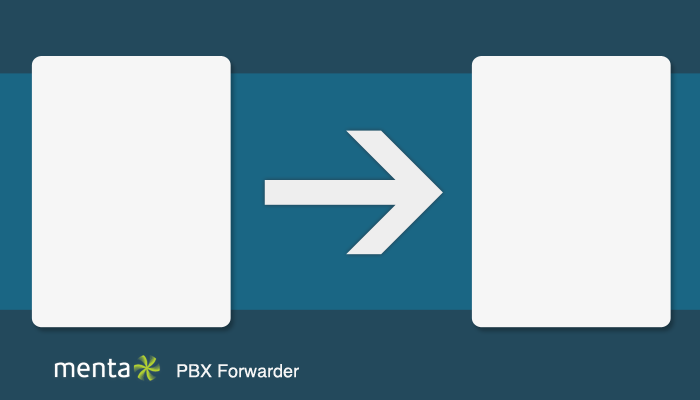
<style>
.page{position:relative;width:700px;height:400px;background:#f6f6f6}
.page>*{position:absolute;margin:0}
.t1{font:18px "Helvetica";color:#f6f6f6}
</style>
<div class="page">
<p class="t1" style="left:177px;top:364px;width:122px;height:14px">PBX Forwarder</p>
</div>
